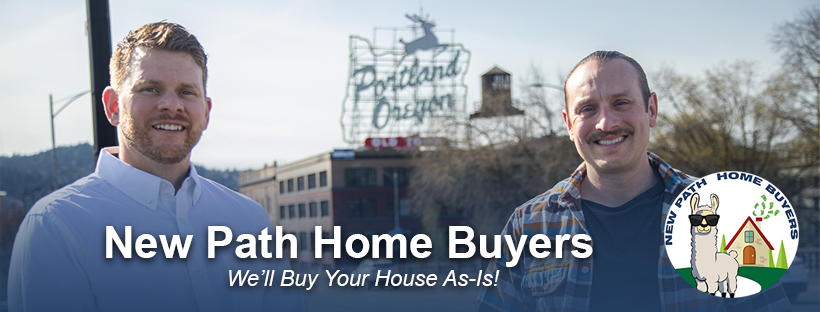
<style>
.page{position:relative;width:820px;height:312px}
.page>*{position:absolute;margin:0}
.t1{font:43.8px "Arial-BoldMT";color:#ffffff}
.t2{font:21.9px "Arial-ItalicMT";color:#ffffff}
</style>
<div class="page">
<p class="t1" style="left:106px;top:226px;width:487px;height:41px">New Path Home Buyers</p>
<p class="t2" style="left:229px;top:270px;width:271px;height:20px">We’ll Buy Your House As-Is!</p>
</div>
